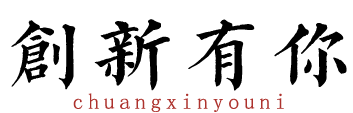
<style>
.page{position:relative;width:353px;height:113px;background:#ffffff}
.page>*{position:absolute;margin:0}
.t1{font:88.2px "zktqkt";color:#000000}
.t2{font:22px "zktqkt";letter-spacing:0.2em;color:#ad322d}
</style>
<div class="page">
<p class="t1" style="left:11px;top:19px;width:336px;height:72px">创新有你</p>
<p class="t2" style="left:73px;top:93px;width:211px;height:19px">chuangxinyouni</p>
</div>
